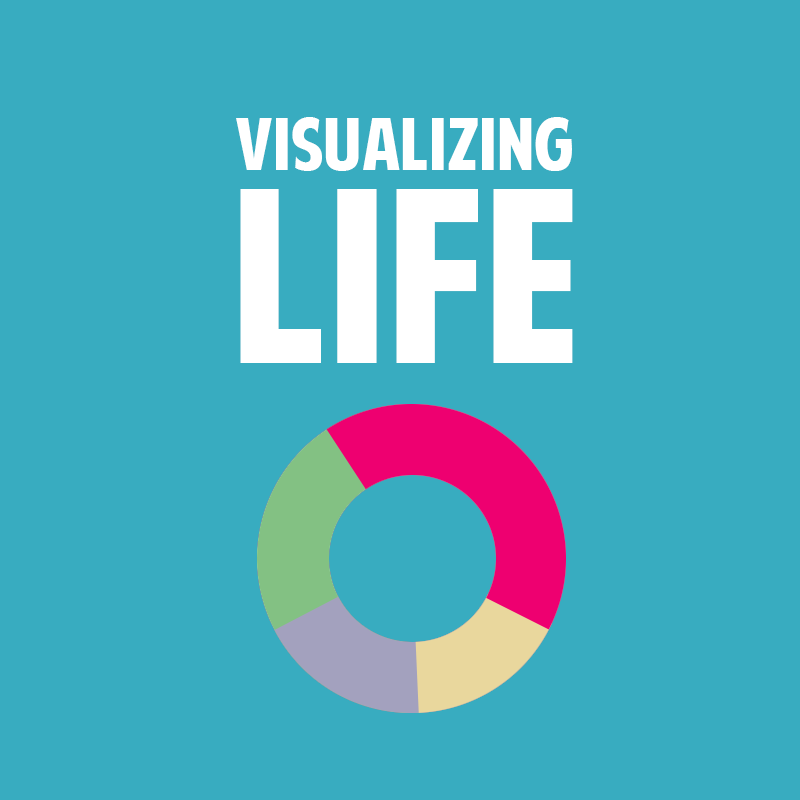
<style>
.page{position:relative;width:800px;height:800px;background:#38acc0}
.page>*{position:absolute;margin:0}
.t1{font:71.4px "AmericanPurpose";color:#ffffff}
.t2{font:240.1px "AmericanPurpose";color:#ffffff}
</style>
<div class="page">
<p class="t1" style="left:236px;top:117px;width:336px;height:54px">vISUALIZING</p>
<p class="t2" style="left:240px;top:189px;width:333px;height:174px">LIFE</p>
</div>
